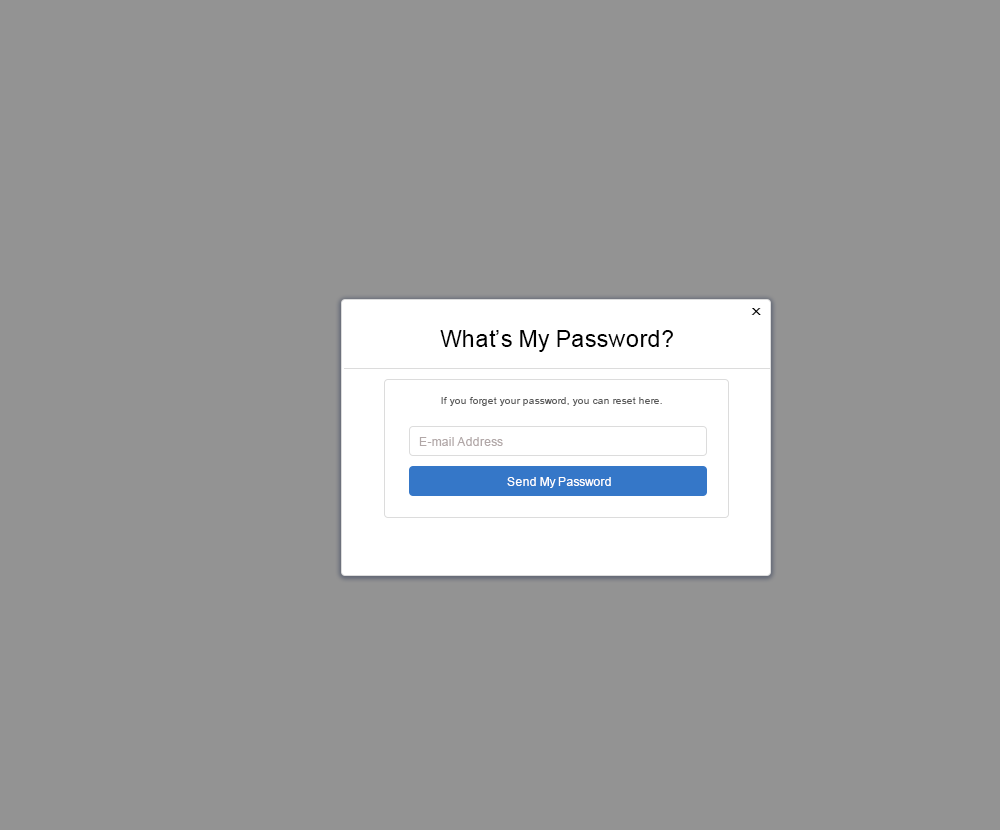
<style>
.page{position:relative;width:1000px;height:830px;background:#939393}
.page>*{position:absolute;margin:0}
.t1{font:11.7px "ArialMT";color:#000000;scale:1.61 1}
.t2{font:23.5px "ArialMT";color:#000000}
.t3{font:10px "ArialMT";color:#5a5a5a}
.t4{font:12px "ArialMT";color:#b2a8a8}
.t5{font:12px "ArialMT";color:#ffffff}
</style>
<div class="page">
<p class="t1" style="left:751px;top:308px;width:10px;height:7px">x</p>
<p class="t2" style="left:440px;top:330px;width:233px;height:22px">What’s My Password?</p>
<p class="t3" style="left:441px;top:397px;width:221px;height:9px">If you forget your password, you can reset here.</p>
<p class="t4" style="left:419px;top:437px;width:84px;height:9px">E-mail Address</p>
<p class="t5" style="left:507px;top:477px;width:104px;height:11px">Send My Password</p>
</div>
